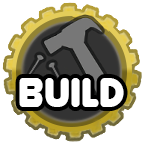
<style>
.page{position:relative;width:142px;height:142px;background:#ffffff}
.page>*{position:absolute;margin:0}
.t1{font:48px "Junegull";color:#ffffff}
</style>
<div class="page">
<p class="t1" style="left:19px;top:78px;width:105px;height:29px">BUILD</p>
</div>
